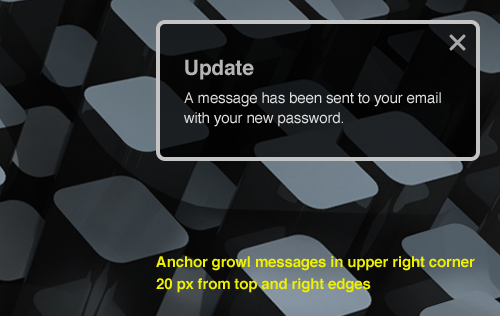
<style>
.page{position:relative;width:500px;height:316px}
.page>*{position:absolute;margin:0}
.t1{font:15px/20px "Helvetica";letter-spacing:-0.01em;color:#dedede}
.t2{font:21px/42px "Helvetica-Bold";letter-spacing:-0.01em;color:#b4b4b4}
.t3{font:15px/22.3px "Helvetica-Bold";letter-spacing:-0.01em;color:#eef100}
</style>
<div class="page">
<p class="t1" style="left:184px;top:59px;width:257px;height:68px"><span class="t2">Update<br> <br></span>A message has been sent to your email with your new password.</p>
<p class="t3" style="left:156px;top:256px;width:319px;height:37px">Anchor growl messages in upper right corner<br>20 px from top and right edges</p>
</div>
